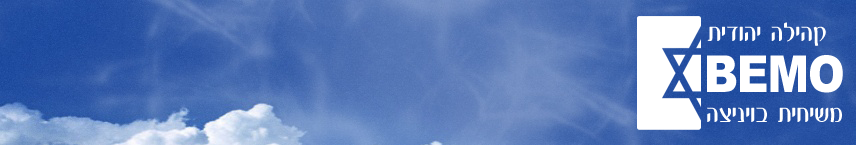
<style>
.page{position:relative;width:856px;height:145px}
.page>*{position:absolute;margin:0}
.t1{font:27.6px "BNBilbo";color:#ffffff;scale:0.93 1}
.t2{font:50.9px "Arial-Black";letter-spacing:-0.025em;color:#ffffff;scale:0.87 1}
</style>
<div class="page">
<p class="t1" style="left:707px;top:22px;width:119px;height:24px">תידוהי הליהק</p>
<p class="t2" style="left:707px;top:55px;width:136px;height:38px">ВЕМО</p>
<p class="t1" style="left:707px;top:107px;width:135px;height:16px">הציניוב תיחישמ</p>
</div>
